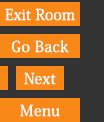
<style>
.page{position:relative;width:104px;height:122px;background:#f88818}
.page>*{position:absolute;margin:0}
.t1{font:15px/32px "KozMinPro-Medium";letter-spacing:0.025em;color:#ffffff}
.t2{font:15px/32px "KozMinPro-Medium";letter-spacing:0.005em;color:#ffffff}
.t3{font:15px/32px "KozMinPro-Medium";color:#ffffff}
</style>
<div class="page">
<p class="t1" style="left:5px;top:8px;width:70px;height:109px;text-align:center"><span class="t2">Exit Roo</span>m<br>Go Back<br><span class="t3">N</span>ext<br>Menu</p>
</div>
